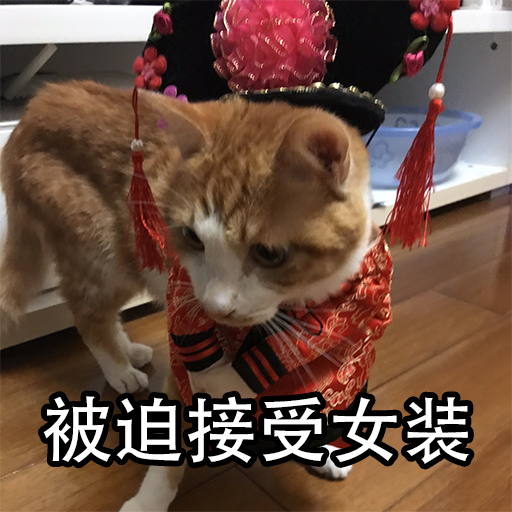
<style>
.page{position:relative;width:512px;height:512px}
.page>*{position:absolute;margin:0}
.t1{font:72px "AdobeHeitiStd-Regular";color:#ffffff}
</style>
<div class="page">
<p class="t1" style="left:43px;top:396px;width:426px;height:68px">被迫接受女装</p>
</div>
